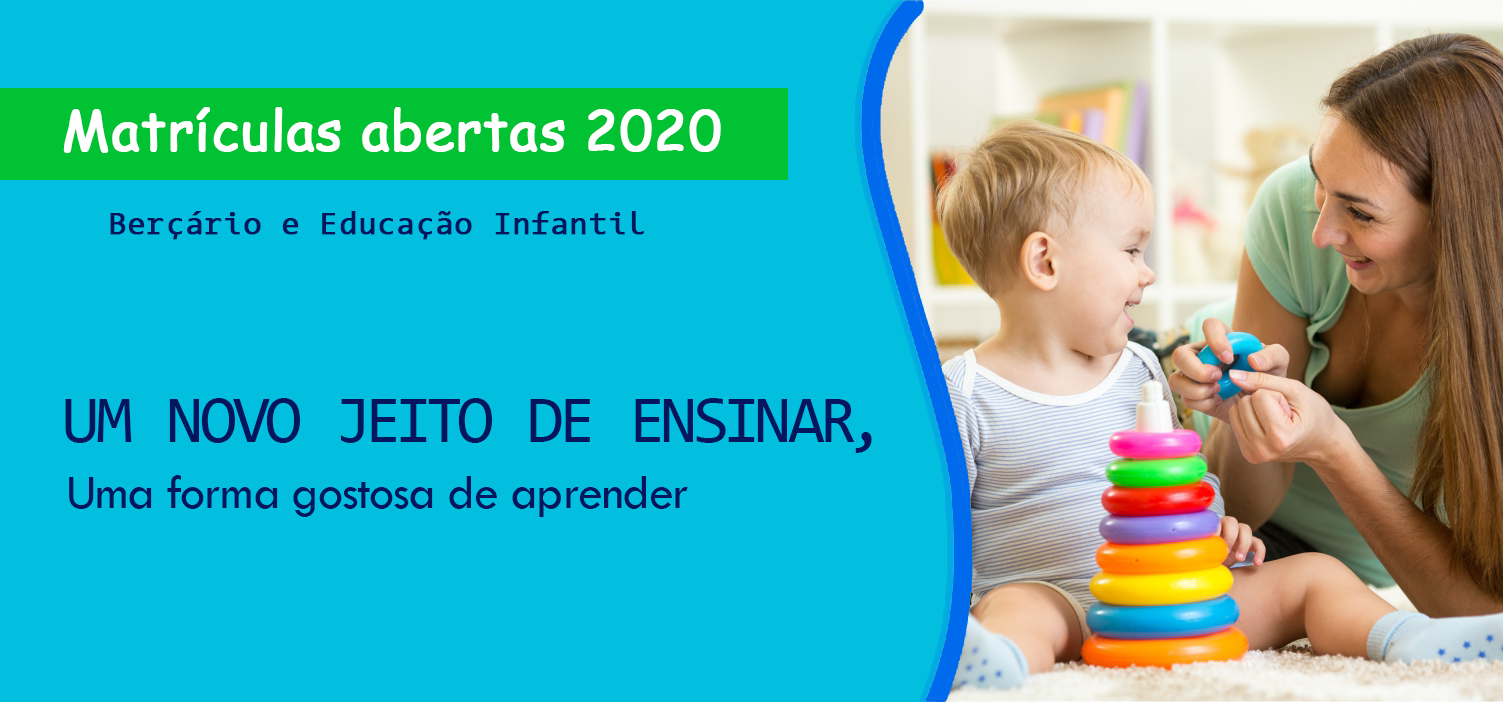
<style>
.page{position:relative;width:1504px;height:702px;background:#02bedf}
.page>*{position:absolute;margin:0}
.t1{font:54.2px "ComicSansMS";color:#ffffff;font-weight:bold}
.t2{font:33.3px "Consolas";color:#05155e;font-weight:bold}
.t3{font:66.7px "Consolas";letter-spacing:-0.025em;color:#05155e;text-transform:uppercase}
.t4{font:50px "TwCenMT-Regular";letter-spacing:-0.025em;color:#05155e}
</style>
<div class="page">
<p class="t1" style="left:63px;top:107px;width:658px;height:46px">Matrículas abertas 2020</p>
<p class="t2" style="left:110px;top:211px;width:534px;height:29px">Berçário e Educação Infantil</p>
<p class="t3" style="left:65px;top:398px;width:807px;height:55px">Um novo jeito de ensinar,</p>
<p class="t4" style="left:69px;top:475px;width:619px;height:42px">Uma forma gostosa de aprender</p>
</div>
